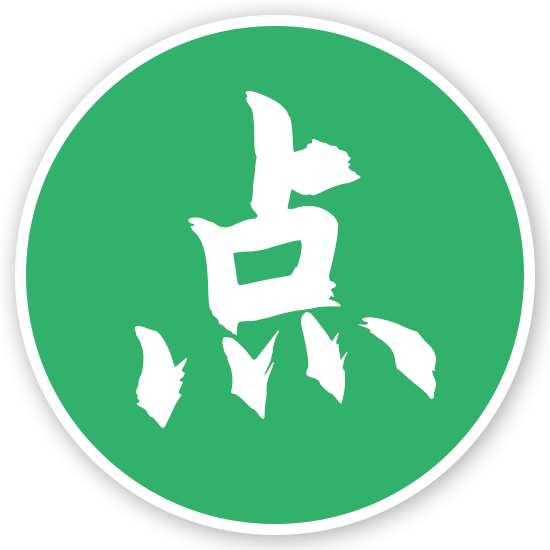
<style>
.page{position:relative;width:550px;height:550px;background:#32b16c}
.page>*{position:absolute;margin:0}
.t1{font:409px "PangMenZhengDao-Cu";color:#ffffff}
</style>
<div class="page">
<p class="t1" style="left:134px;top:91px;width:302px;height:337px">点</p>
</div>
